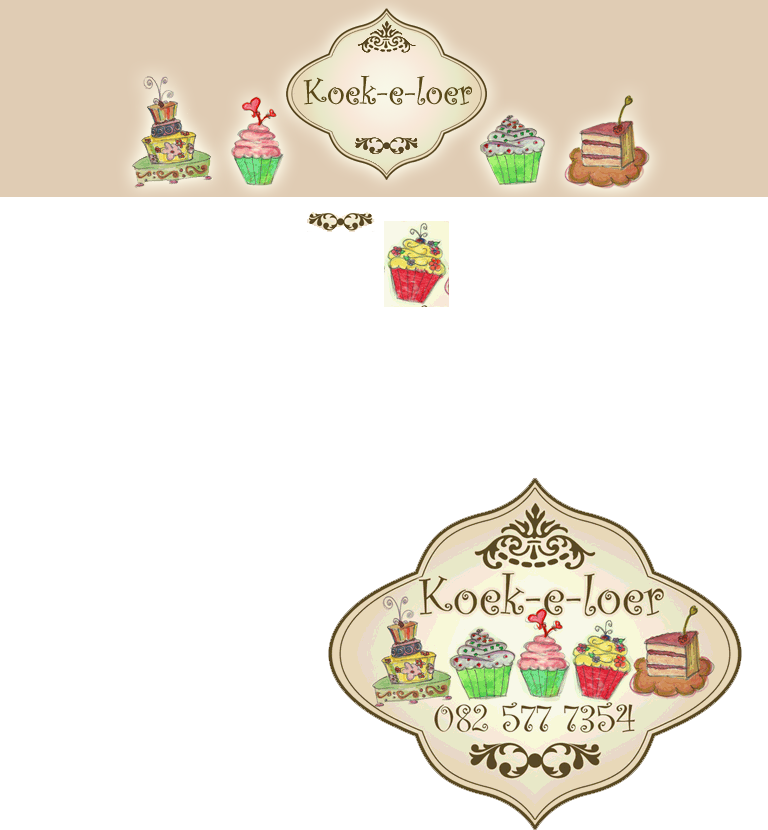
<style>
.page{position:relative;width:768px;height:830px;background:#ffffff}
.page>*{position:absolute;margin:0}
.t1{font:37.5px "CurlzMT";color:#584818}
</style>
<div class="page">
<p class="t1" style="left:303px;top:75px;width:169px;height:30px">Koek-e-loer</p>
</div>
